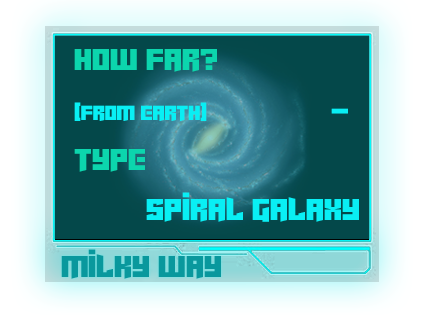
<style>
.page{position:relative;width:424px;height:315px}
.page>*{position:absolute;margin:0}
.t1{font:33.3px/50px "Cyberjunkies";color:#09eff4}
.t2{font:33.3px/50px "Cyberjunkies";color:#0cd5ad}
.t3{font:22.2px/50px "Cyberjunkies";color:#09eff4}
.t4{font:33.3px "Cyberjunkies";color:#09989d}
</style>
<div class="page">
<p class="t1" style="left:74px;top:49px;width:285px;height:173px"><span class="t2">how far?<br></span><span class="t3">(from earth)</span>               -<br><span class="t2">type<br></span>  spiral galaxy</p>
<p class="t4" style="left:61px;top:249px;width:160px;height:30px">milky way</p>
</div>
